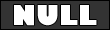
<style>
.page{position:relative;width:110px;height:30px;background:#333333}
.page>*{position:absolute;margin:0}
.t1{font:26.7px "GillSans-UltraBold";color:#ffffff}
</style>
<div class="page">
<p class="t1" style="left:14px;top:5px;width:83px;height:21px">NULL</p>
</div>
